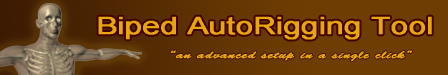
<style>
.page{position:relative;width:448px;height:75px;background:#6e3d03}
.page>*{position:absolute;margin:0}
.t1{font:24px "Small Fonts";letter-spacing:0.01em;color:#e7a60b;font-weight:bold;scale:1.3 1}
.t2{font:11px "BrushScriptStd";letter-spacing:0.05em;color:#e7a60b;font-weight:bold;scale:1.3 1}
</style>
<div class="page">
<p class="t1" style="left:98px;top:16px;width:334px;height:24px">Biped AutoRigging Tool</p>
<p class="t2" style="left:170px;top:50px;width:243px;height:12px">“an advanced setup in a single click”</p>
</div>
